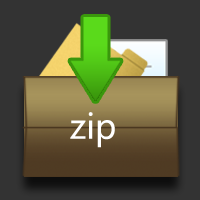
<style>
.page{position:relative;width:200px;height:200px;background:#333333}
.page>*{position:absolute;margin:0}
.t1{font:36.3px "SegoeUI";color:#ffffff}
</style>
<div class="page">
<p class="t1" style="left:70px;top:112px;width:45px;height:36px">zip</p>
</div>
